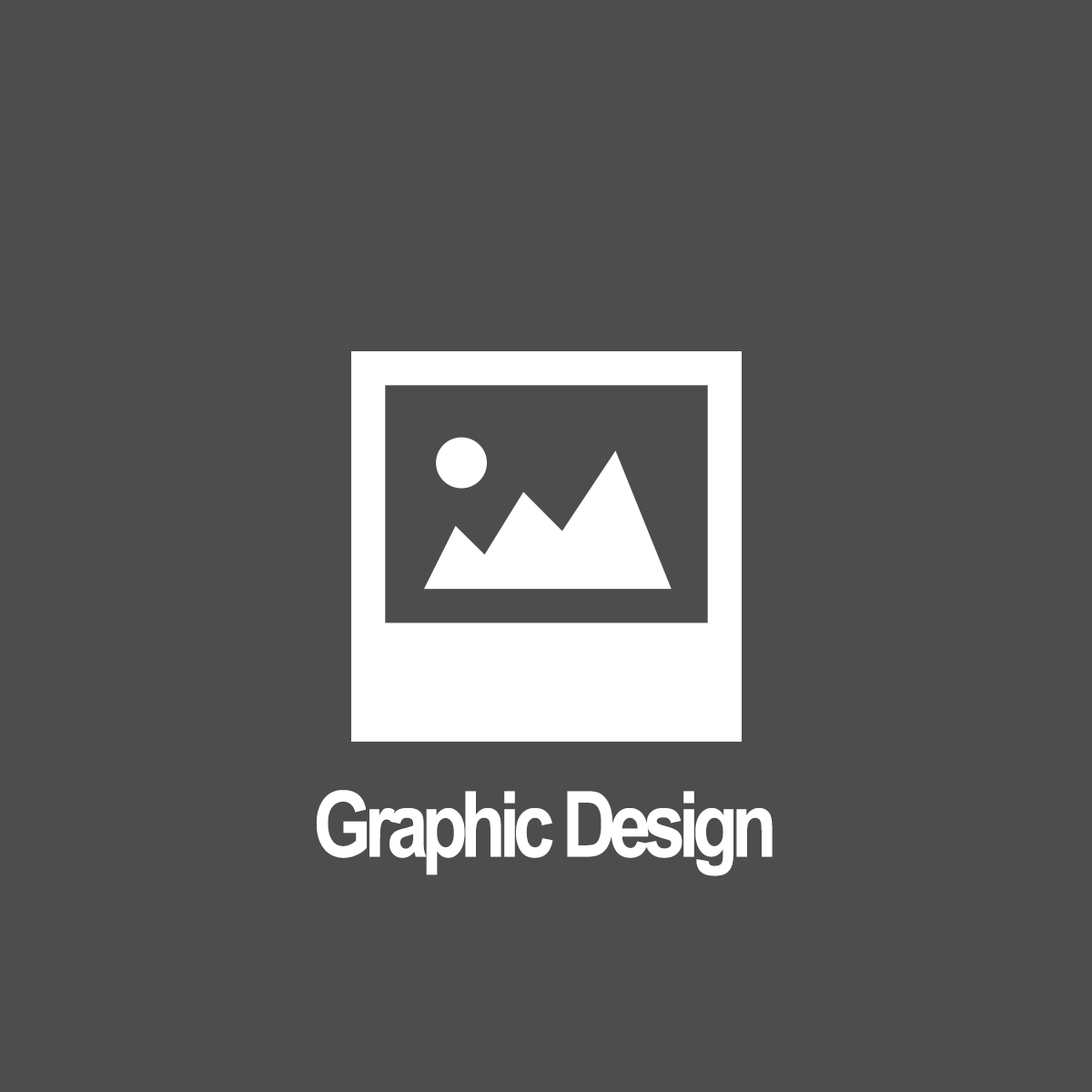
<style>
.page{position:relative;width:1092px;height:1092px;background:#4d4d4d}
.page>*{position:absolute;margin:0}
.t1{font:156.5px "ArialNarrow-Bold";letter-spacing:-0.075em;color:#ffffff}
</style>
<div class="page">
<p class="t1" style="left:316px;top:790px;width:457px;height:86px">Graphic Design</p>
</div>
